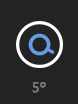
<style>
.page{position:relative;width:78px;height:104px;background:#232323}
.page>*{position:absolute;margin:0}
.t1{font:14px "SegoeUI";color:#7c7c7c;font-weight:bold}
</style>
<div class="page">
<p class="t1" style="left:32px;top:82px;width:14px;height:11px">5º</p>
</div>
